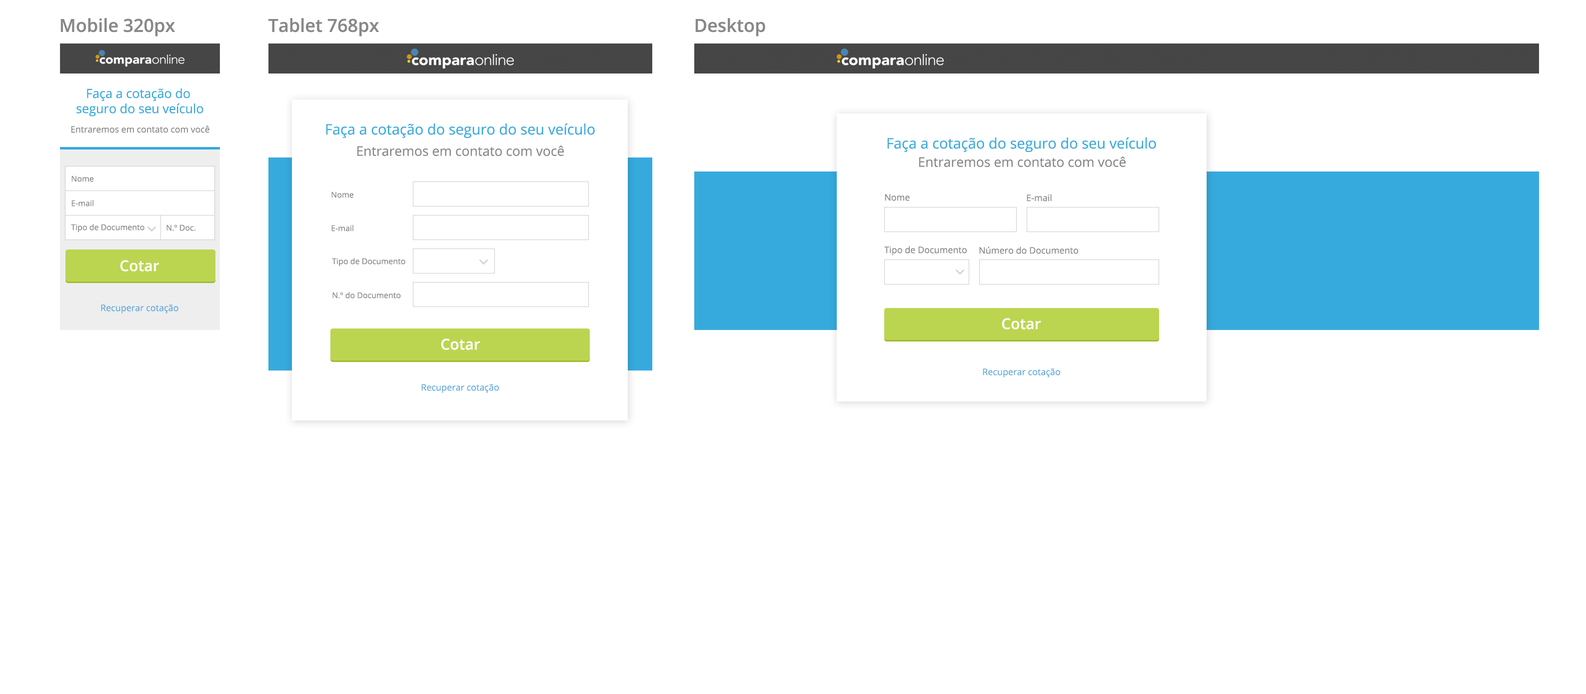
<style>
.page{position:relative;width:1586px;height:694px;background:#ffffff}
.page>*{position:absolute;margin:0}
.t1{font:18px "OpenSans-Semibold";color:#888888}
.t2{font:12.6px "OpenSans";color:#36aadd}
.t3{font:8.9px "OpenSans";color:#888888}
.t4{font:14.5px "OpenSans";color:#36aadd}
.t5{font:13.3px "OpenSans";color:#888888}
.t6{font:8px "OpenSans";color:#888888}
.t7{font:9px "OpenSans";color:#888888}
.t8{font:15px "OpenSans-Semibold";color:#ffffff}
.t9{font:9px "OpenSans";color:#5faadb}
</style>
<div class="page">
<p class="t1" style="left:60px;top:18px;width:115px;height:18px">Mobile 320px</p>
<p class="t1" style="left:268px;top:18px;width:111px;height:18px">Tablet 768px</p>
<p class="t1" style="left:696px;top:18px;width:70px;height:18px">Desktop</p>
<p class="t2" style="left:76px;top:88px;width:128px;height:28px;text-align:center">Faça a cotação do <br>seguro do seu veículo</p>
<p class="t3" style="left:71px;top:126px;width:139px;height:7px">Entraremos em contato com você</p>
<p class="t4" style="left:326px;top:123px;width:269px;height:15px">Faça a cotação do seguro do seu veículo</p>
<p class="t4" style="left:888px;top:137px;width:268px;height:15px">Faça a cotação do seguro do seu veículo</p>
<p class="t5" style="left:358px;top:146px;width:206px;height:10px">Entraremos em contato com você</p>
<p class="t5" style="left:920px;top:156px;width:206px;height:11px">Entraremos em contato com você</p>
<p class="t6" style="left:72px;top:176px;width:22px;height:6px">Nome</p>
<p class="t6" style="left:332px;top:192px;width:22px;height:6px">Nome</p>
<p class="t7" style="left:885px;top:194px;width:25px;height:7px">Nome</p>
<p class="t7" style="left:1027px;top:194px;width:25px;height:8px">E-mail</p>
<p class="t6" style="left:72px;top:200px;width:22px;height:6px">E-mail</p>
<p class="t6" style="left:71px;top:224px;width:73px;height:8px">Tipo de Documento</p>
<p class="t6" style="left:166px;top:224px;width:30px;height:7px">N.º Doc.</p>
<p class="t6" style="left:332px;top:225px;width:22px;height:7px">E-mail</p>
<p class="t7" style="left:884px;top:246px;width:83px;height:10px">Tipo de Documento</p>
<p class="t7" style="left:980px;top:246px;width:98px;height:8px">Número do Documento</p>
<p class="t8" style="left:120px;top:260px;width:40px;height:12px">Cotar</p>
<p class="t6" style="left:332px;top:258px;width:74px;height:8px">Tipo de Documento</p>
<p class="t6" style="left:332px;top:292px;width:69px;height:6px">N.º do Documento</p>
<p class="t9" style="left:101px;top:304px;width:77px;height:10px">Recuperar cotação</p>
<p class="t8" style="left:1002px;top:318px;width:40px;height:12px">Cotar</p>
<p class="t8" style="left:441px;top:338px;width:39px;height:12px">Cotar</p>
<p class="t9" style="left:983px;top:368px;width:77px;height:10px">Recuperar cotação</p>
<p class="t9" style="left:422px;top:384px;width:77px;height:9px">Recuperar cotação</p>
</div>
